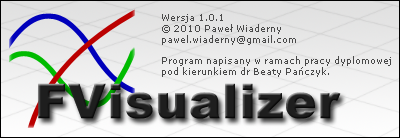
<style>
.page{position:relative;width:400px;height:138px}
.page>*{position:absolute;margin:0}
.t1{font:9px "Verdana";color:#494949}
.t2{font:48px "Arial-Black";color:#1e1e1e;font-weight:bold}
</style>
<div class="page">
<p class="t1" style="left:162px;top:14px;width:229px;height:63px">Wersja 1.0.1<br>© 2010 Paweł Wiaderny<br>pawel.wiaderny@gmail.com<br><br>Program napisany w ramach pracy dyplomowej<br>pod kierunkiem dr Beaty Pańczyk.</p>
<p class="t2" style="left:38px;top:83px;width:303px;height:36px">FVisualizer</p>
</div>
